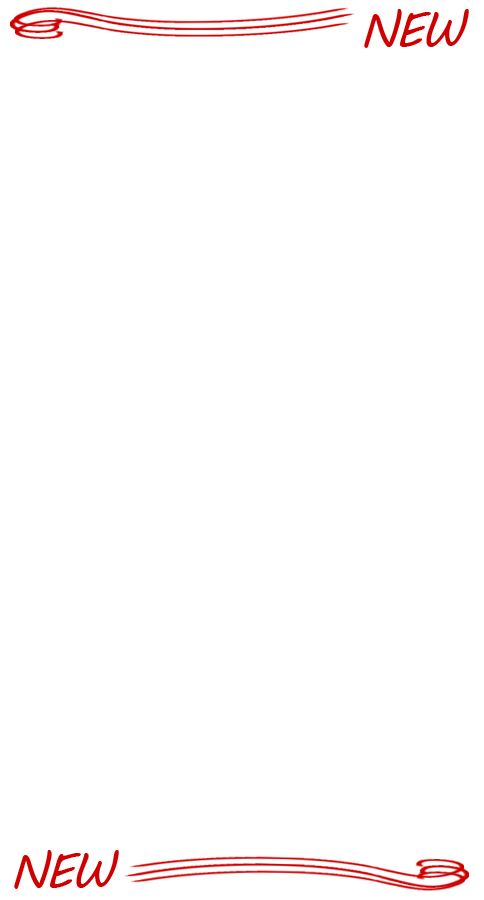
<style>
.page{position:relative;width:484px;height:900px;background:#ffffff}
.page>*{position:absolute;margin:0}
.t1{font:47.6px "MVBoli";letter-spacing:-0.05em;color:#cf0000}
</style>
<div class="page">
<p class="t1" style="left:364px;top:9px;width:105px;height:39px">NEW</p>
<p class="t1" style="left:14px;top:850px;width:105px;height:39px">NEW</p>
</div>
